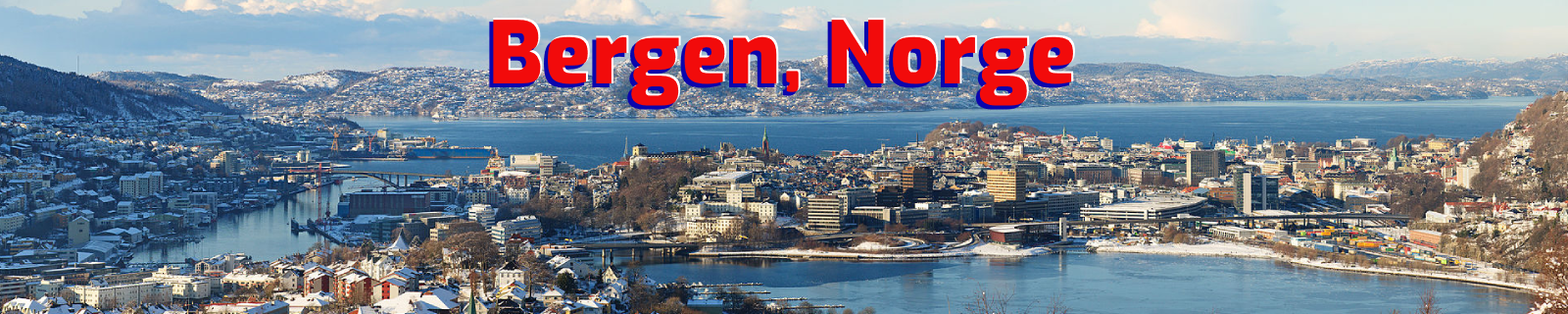
<style>
.page{position:relative;width:1568px;height:314px}
.page>*{position:absolute;margin:0}
.t1{font:88.2px "Exo-Black";color:#f20b0b}
</style>
<div class="page">
<p class="t1" style="left:493px;top:18px;width:582px;height:88px">Bergen, Norge</p>
</div>
